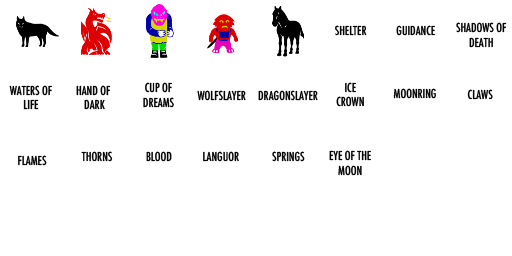
<style>
.page{position:relative;width:512px;height:256px;background:#ffffff}
.page>*{position:absolute;margin:0}
.t1{font:12px "Futura-CondensedMedium";color:#000000}
</style>
<div class="page">
<p class="t1" style="left:335px;top:25px;width:32px;height:11px">SHELTER</p>
<p class="t1" style="left:396px;top:25px;width:39px;height:11px">GUIDANCE</p>
<p class="t1" style="left:456px;top:22px;width:51px;height:26px;text-align:center">SHADOWS OF<br>DEATH</p>
<p class="t1" style="left:9px;top:85px;width:43px;height:25px;text-align:center">WATERS OF<br>LIFE</p>
<p class="t1" style="left:76px;top:85px;width:35px;height:25px;text-align:center">HAND OF <br>DARK</p>
<p class="t1" style="left:143px;top:82px;width:31px;height:26px;text-align:center">CUP OF<br>DREAMS</p>
<p class="t1" style="left:336px;top:82px;width:28px;height:25px;text-align:center">ICE<br>CROWN</p>
<p class="t1" style="left:393px;top:88px;width:43px;height:11px">MOONRING</p>
<p class="t1" style="left:467px;top:89px;width:26px;height:11px">CLAWS</p>
<p class="t1" style="left:197px;top:90px;width:49px;height:11px">WOLFSLAYER</p>
<p class="t1" style="left:258px;top:90px;width:60px;height:11px">DRAGONSLAYER</p>
<p class="t1" style="left:329px;top:150px;width:42px;height:26px;text-align:center">EYE OF THE<br>MOON</p>
<p class="t1" style="left:18px;top:155px;width:29px;height:11px">FLAMES</p>
<p class="t1" style="left:81px;top:151px;width:32px;height:11px">THORNS</p>
<p class="t1" style="left:146px;top:151px;width:26px;height:11px">BLOOD</p>
<p class="t1" style="left:203px;top:151px;width:36px;height:11px">LANGUOR</p>
<p class="t1" style="left:272px;top:151px;width:33px;height:11px">SPRINGS</p>
</div>
